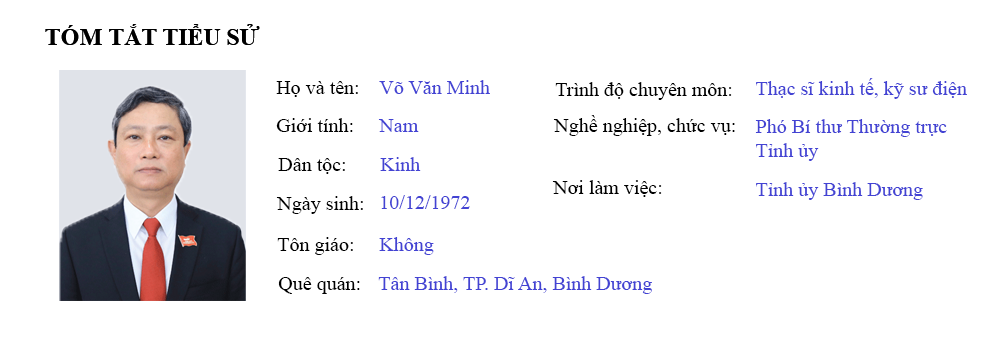
<style>
.page{position:relative;width:997px;height:338px;background:#ffffff}
.page>*{position:absolute;margin:0}
.t1{font:24px "TimesNewRomanPS-BoldMT";color:#000000}
.t2{font:20px "TimesNewRomanPSMT";color:#4343d4}
.t3{font:20px "TimesNewRomanPSMT";color:#000000}
.t4{font:20px/24px "TimesNewRomanPSMT";color:#4343d4}
</style>
<div class="page">
<p class="t1" style="left:45px;top:24px;width:215px;height:21px">TÓM TẮT TIỂU SỬ</p>
<p class="t2" style="left:756px;top:78px;width:211px;height:21px">Thạc sĩ kinh tế, kỹ sư điện</p>
<p class="t3" style="left:276px;top:81px;width:82px;height:16px">Họ và tên:</p>
<p class="t2" style="left:379px;top:80px;width:111px;height:14px">Võ Văn Minh</p>
<p class="t3" style="left:555px;top:82px;width:177px;height:18px">Trình độ chuyên môn:</p>
<p class="t3" style="left:276px;top:118px;width:77px;height:14px">Giới tính:</p>
<p class="t2" style="left:378px;top:119px;width:41px;height:13px">Nam</p>
<p class="t3" style="left:553px;top:115px;width:182px;height:21px">Nghề nghiệp, chức vụ:</p>
<p class="t4" style="left:755px;top:119px;width:192px;height:42px">Phó Bí thư Thường trực <br>Tỉnh ủy</p>
<p class="t3" style="left:278px;top:158px;width:67px;height:16px">Dân tộc:</p>
<p class="t2" style="left:380px;top:157px;width:41px;height:14px">Kinh</p>
<p class="t3" style="left:552px;top:180px;width:110px;height:17px">Nơi làm việc:</p>
<p class="t2" style="left:756px;top:182px;width:167px;height:18px">Tỉnh ủy Bình Dương</p>
<p class="t3" style="left:276px;top:196px;width:87px;height:18px">Ngày sinh:</p>
<p class="t2" style="left:381px;top:195px;width:89px;height:14px">10/12/1972</p>
<p class="t3" style="left:277px;top:237px;width:76px;height:18px">Tôn giáo:</p>
<p class="t2" style="left:379px;top:237px;width:55px;height:18px">Không</p>
<p class="t3" style="left:278px;top:277px;width:82px;height:17px">Quê quán:</p>
<p class="t2" style="left:378px;top:276px;width:274px;height:18px">Tân Bình, TP. Dĩ An, Bình Dương</p>
</div>
